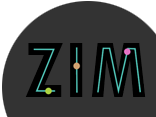
<style>
.page{position:relative;width:156px;height:117px;background:#333333}
.page>*{position:absolute;margin:0}
.t1{font:83px "TwCenMT-CondensedExtraBold";color:#000000}
</style>
<div class="page">
<p class="t1" style="left:25px;top:43px;width:121px;height:54px">ZIM</p>
</div>
